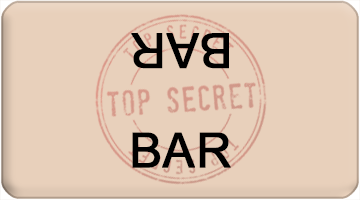
<style>
.page{position:relative;width:360px;height:200px;background:#e8d0bb}
.page>*{position:absolute;margin:0}
.t1{font:48px "ArialMT";color:#000000;font-weight:bold}
</style>
<div class="page">
<p class="t1" style="left:131px;top:33px;width:98px;height:36px;rotate:180deg">BAR</p>
<p class="t1" style="left:132px;top:132px;width:99px;height:36px">BAR</p>
</div>
